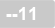
<style>
.page{position:relative;width:55px;height:28px;background:#c9c9c9}
.page>*{position:absolute;margin:0}
.t1{font:18.2px "Arial-BoldMT";color:#ffffff}
</style>
<div class="page">
<p class="t1" style="left:6px;top:7px;width:30px;height:13px">--11</p>
</div>
